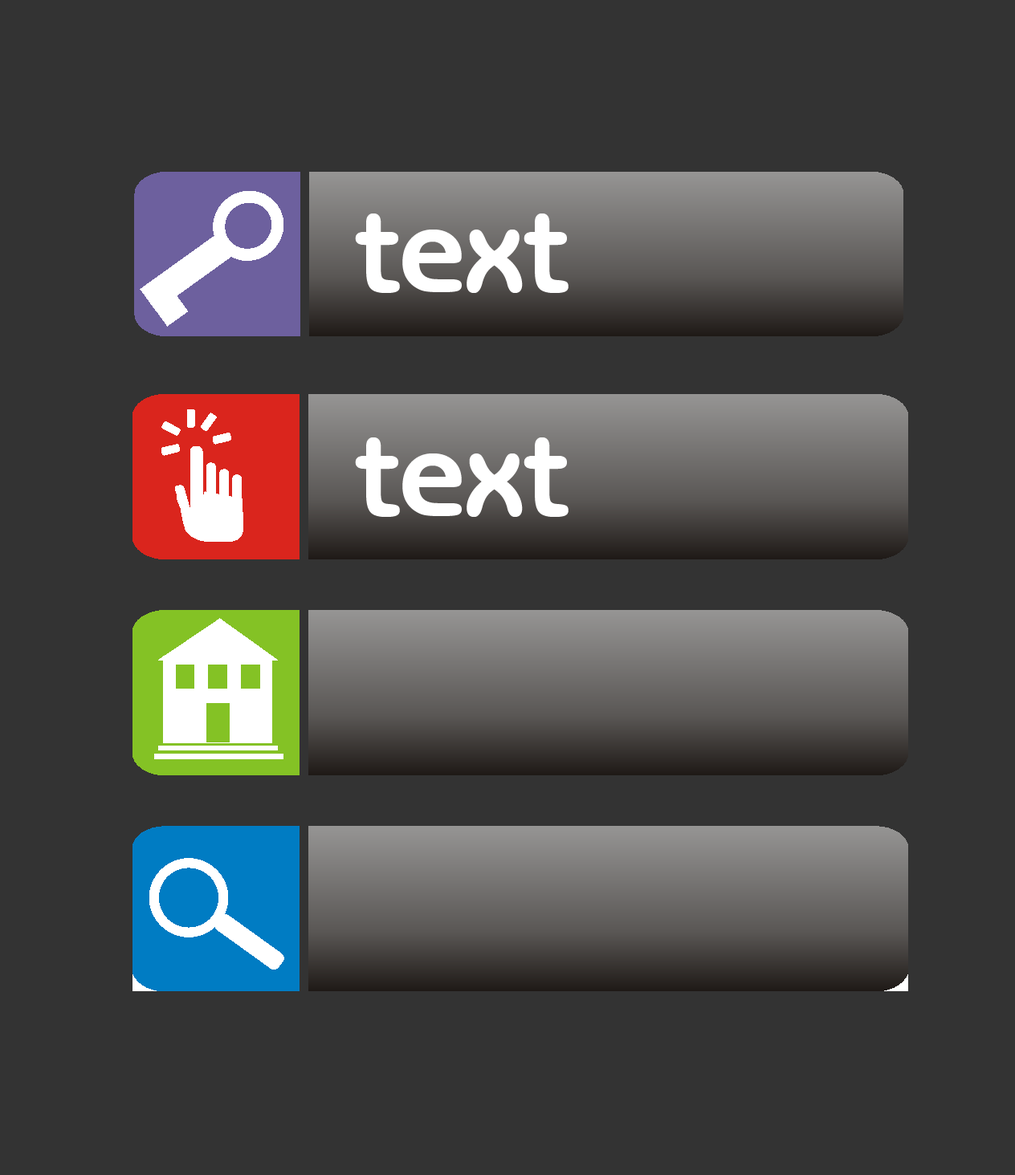
<style>
.page{position:relative;width:1015px;height:1175px;background:#333333}
.page>*{position:absolute;margin:0}
.t1{font:120.4px "BenguiatGothicITCbyBT-Bold";color:#ffffff}
</style>
<div class="page">
<p class="t1" style="left:355px;top:214px;width:213px;height:79px">text</p>
<p class="t1" style="left:355px;top:437px;width:213px;height:80px">text</p>
</div>
